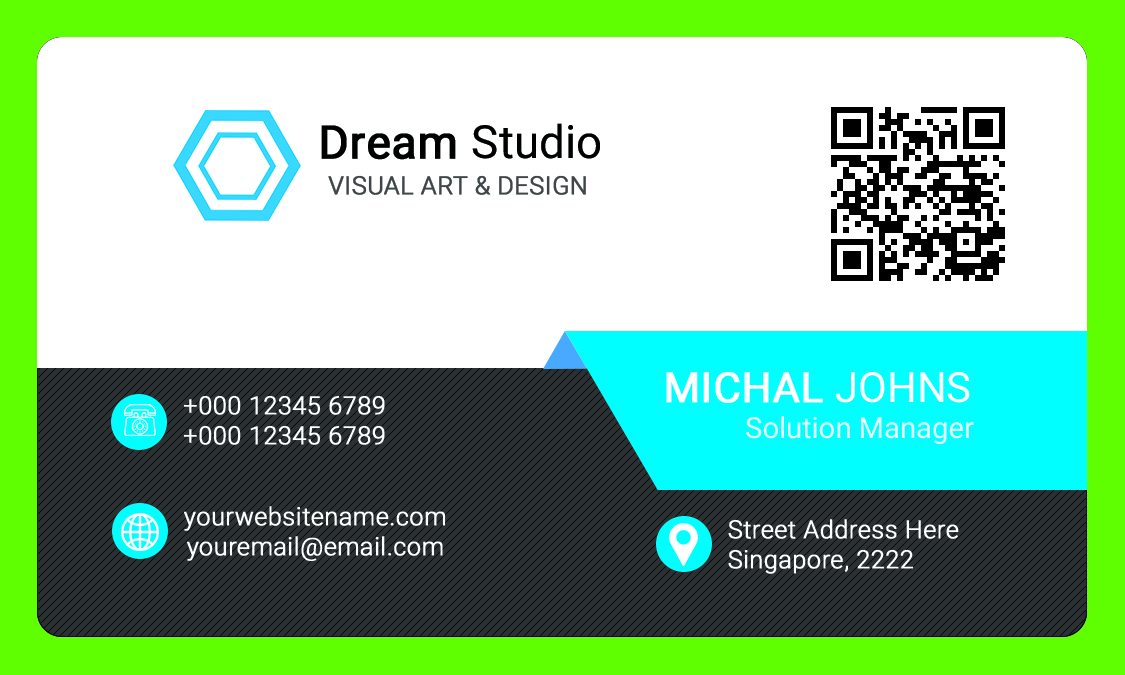
<style>
.page{position:relative;width:1125px;height:675px;background:#ffffff}
.page>*{position:absolute;margin:0}
.t1{font:45.8px "Roboto-Regular";color:#000000}
.t2{font:45.8px "Roboto-Regular";color:#000000;font-weight:bold}
.t3{font:25px "Roboto-Light";color:#404647;font-weight:bold}
.t4{font:41.7px "Roboto-Regular";color:#ffffff;font-weight:bold}
.t5{font:41.7px "Roboto-Regular";color:#ffffff}
.t6{font:25px "Roboto-Light";color:#ffffff;font-weight:bold}
.t7{font:29.2px "Roboto-Regular";color:#e6ffff}
</style>
<div class="page">
<p class="t1" style="left:321px;top:123px;width:279px;height:37px"><span class="t2">Dream </span>Studio</p>
<p class="t3" style="left:328px;top:175px;width:258px;height:20px">VISUAL ART &amp; DESIGN</p>
<p class="t4" style="left:666px;top:372px;width:304px;height:31px">MICHAL <span class="t5">JOHNS</span></p>
<p class="t6" style="left:183px;top:395px;width:202px;height:50px;text-align:center">+000 12345 6789<br>+000 12345 6789</p>
<p class="t7" style="left:746px;top:416px;width:228px;height:28px">Solution Manager</p>
<p class="t6" style="left:183px;top:506px;width:263px;height:56px;text-align:center">yourwebsitename.com<br>youremail@email.com</p>
<p class="t6" style="left:728px;top:519px;width:231px;height:55px">Street Address Here<br>Singapore, 2222</p>
</div>
